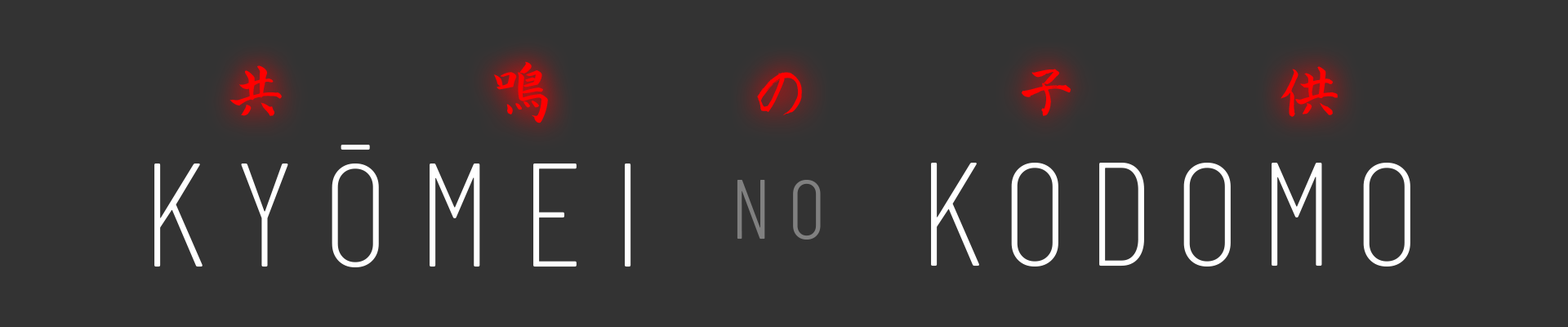
<style>
.page{position:relative;width:1568px;height:327px;background:#333333}
.page>*{position:absolute;margin:0}
.t1{font:64.2px "nagayama_kai";letter-spacing:3.1em;color:#ff0000}
.t2{font:146.8px "BarlowCondensed-ExtraLight";letter-spacing:0.2em;color:#ffffff;text-transform:uppercase}
.t3{font:82.6px "BarlowCondensed-Light";letter-spacing:0.2em;color:#808080;text-transform:uppercase}
.t4{font:146.8px "BarlowCondensed-ExtraLight";letter-spacing:0.133em;color:#ffffff;text-transform:uppercase}
</style>
<div class="page">
<p class="t1" style="left:229px;top:61px;width:1109px;height:62px">共鳴の子供</p>
<p class="t2" style="left:154px;top:145px;width:667px;height:122px">Kyōmei <span class="t3">no</span></p>
<p class="t4" style="left:931px;top:163px;width:479px;height:103px">kodomo</p>
</div>
